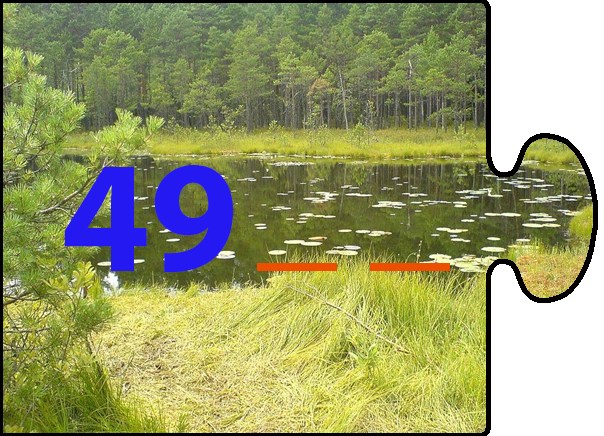
<style>
.page{position:relative;width:604px;height:436px}
.page>*{position:absolute;margin:0}
.t1{font:160px "MyriadPro-Bold";color:#241af1}
.t2{font:160px "MyriadPro-Bold";color:#ed4f01}
</style>
<div class="page">
<p class="t1" style="left:64px;top:165px;width:169px;height:108px">49</p>
<p class="t2" style="left:257px;top:263px;width:193px;height:8px">_ _</p>
</div>
